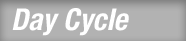
<style>
.page{position:relative;width:186px;height:41px;background:#b2b2b2}
.page>*{position:absolute;margin:0}
.t1{font:30px "HelveticaNeueLTPro-BdCnO";color:#ffffff}
</style>
<div class="page">
<p class="t1" style="left:12px;top:8px;width:117px;height:28px">Day Cycle</p>
</div>
